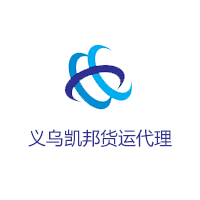
<style>
.page{position:relative;width:200px;height:200px;background:#ffffff}
.page>*{position:absolute;margin:0}
.t1{font:18px "MicrosoftYaHei";color:#2e3192}
</style>
<div class="page">
<p class="t1" style="left:28px;top:129px;width:144px;height:18px">义乌凯邦货运代理</p>
</div>
